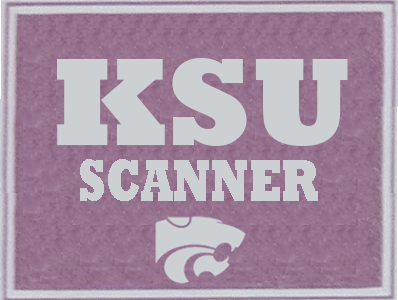
<style>
.page{position:relative;width:398px;height:300px}
.page>*{position:absolute;margin:0}
.t1{font:127.5px "Rockwell-ExtraBold";color:#cdd0d2;scale:1.07 1}
.t2{font:61.3px "Rockwell-ExtraBold";color:#cdd0d2;scale:0.71 1}
</style>
<div class="page">
<p class="t1" style="left:57px;top:58px;width:291px;height:88px">KSU</p>
<p class="t2" style="left:80px;top:159px;width:238px;height:42px">SCANNER</p>
</div>
